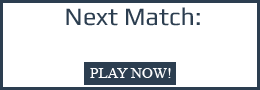
<style>
.page{position:relative;width:260px;height:90px;background:#ffffff}
.page>*{position:absolute;margin:0}
.t1{font:25px "Play";color:#2c3e50}
.t2{font:15px "TimesNewRomanPSMT";color:#ffffff}
</style>
<div class="page">
<p class="t1" style="left:66px;top:7px;width:134px;height:19px">Next Match:</p>
<p class="t2" style="left:90px;top:68px;width:81px;height:10px">PLAY NOW!</p>
</div>
